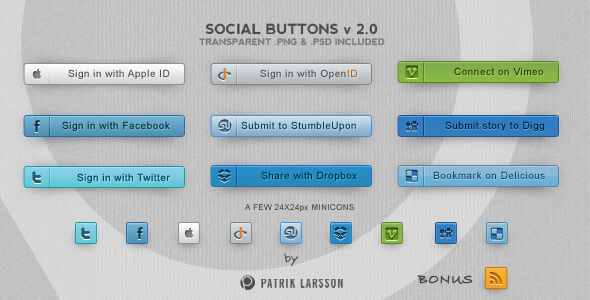
<style>
.page{position:relative;width:590px;height:300px}
.page>*{position:absolute;margin:0}
.t1{font:10px "ArialMT";letter-spacing:0.05em;color:#4d4d4d}
.t2{font:10px "ArialMT";letter-spacing:0.05em;color:#b06517}
.t3{font:10px "ArialMT";letter-spacing:0.05em;color:#213600}
.t4{font:10px "ArialMT";letter-spacing:0.05em;color:#002432}
.t5{font:10px "ArialMT";letter-spacing:0.05em;color:#003e56}
.t6{font:10px "ArialMT";letter-spacing:0.05em;color:#00182e}
.t7{font:10px "ArialMT";letter-spacing:0.05em;color:#004d6b}
.t8{font:10px "ArialMT";letter-spacing:0.05em;color:#002838}
.t9{font:10px "ArialMT";letter-spacing:0.05em;color:#164067}
</style>
<div class="page">
<p class="t1" style="left:68px;top:69px;width:102px;height:10px">Sign in with Apple ID</p>
<p class="t1" style="left:260px;top:69px;width:97px;height:10px">Sign in with Open<span class="t2">ID</span></p>
<p class="t3" style="left:454px;top:67px;width:89px;height:8px">Connect on Vimeo</p>
<p class="t4" style="left:62px;top:121px;width:108px;height:10px">Sign in with Facebook</p>
<p class="t5" style="left:241px;top:121px;width:115px;height:10px">Submit to StumbleUpon</p>
<p class="t6" style="left:445px;top:121px;width:99px;height:10px">Submit story to Digg</p>
<p class="t7" style="left:77px;top:173px;width:93px;height:11px">Sign in with Twitter</p>
<p class="t8" style="left:261px;top:171px;width:96px;height:10px">Share with Dropbox</p>
<p class="t9" style="left:433px;top:171px;width:112px;height:8px">Bookmark on Delicious</p>
</div>
